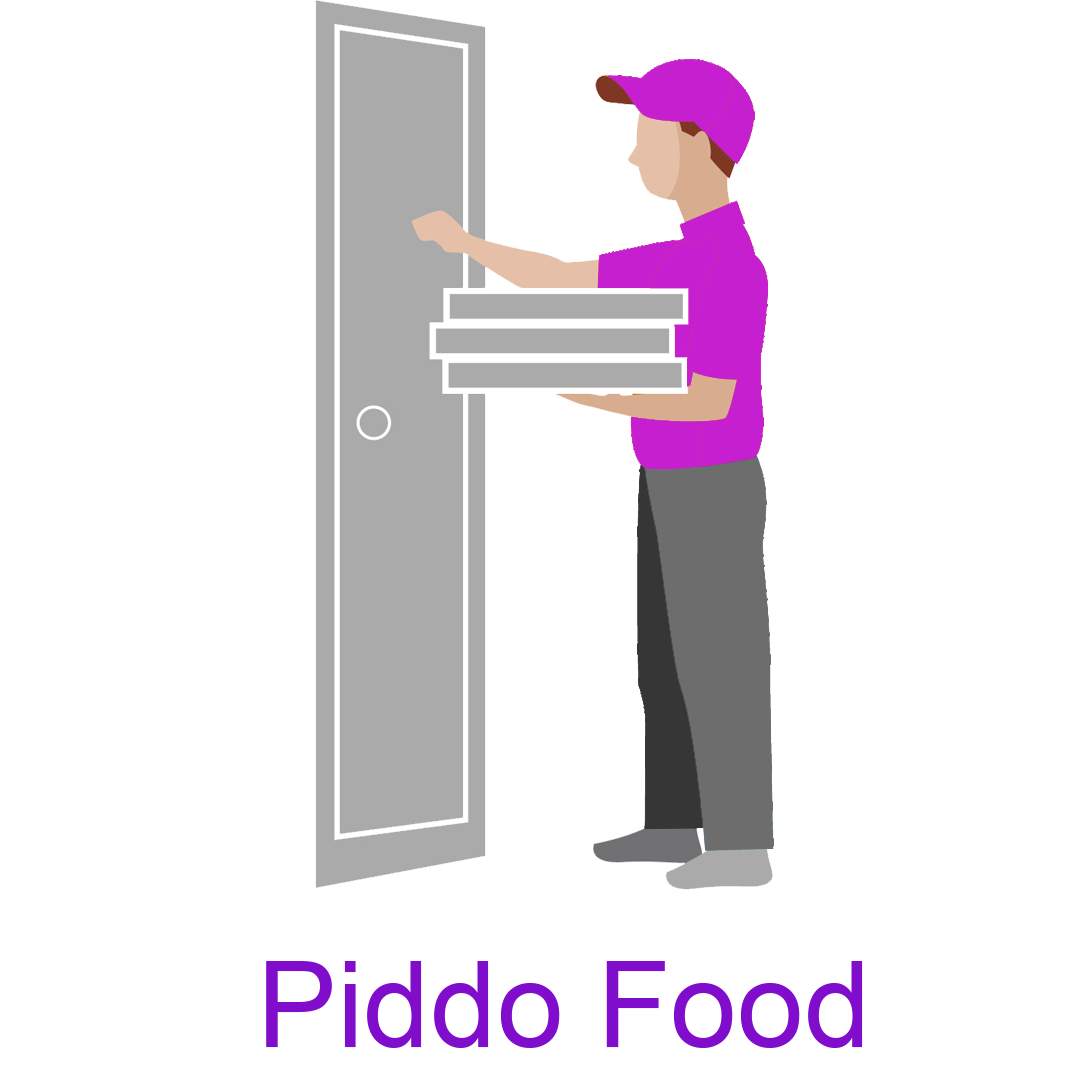
<style>
.page{position:relative;width:1080px;height:1080px;background:#ffffff}
.page>*{position:absolute;margin:0}
.t1{font:120px "ArialMT";color:#800dcc}
</style>
<div class="page">
<p class="t1" style="left:266px;top:961px;width:597px;height:87px">Piddo Food</p>
</div>
